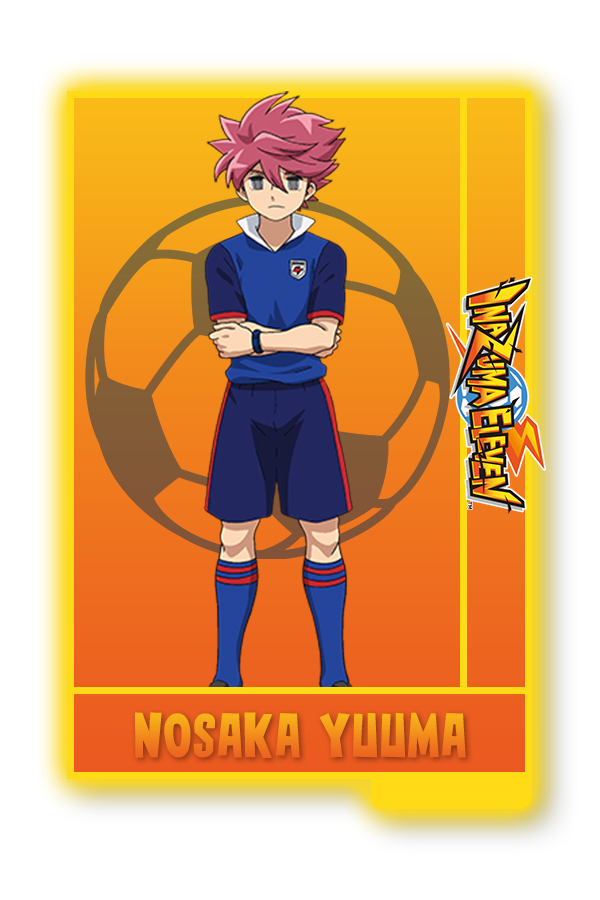
<style>
.page{position:relative;width:600px;height:900px;background:#ffffff}
.page>*{position:absolute;margin:0}
.t1{font:65.2px "TTG-Bold"}
</style>
<div class="page">
<p class="t1" style="left:135px;top:712px;width:331px;height:46px">Nosaka Yuuma</p>
</div>
